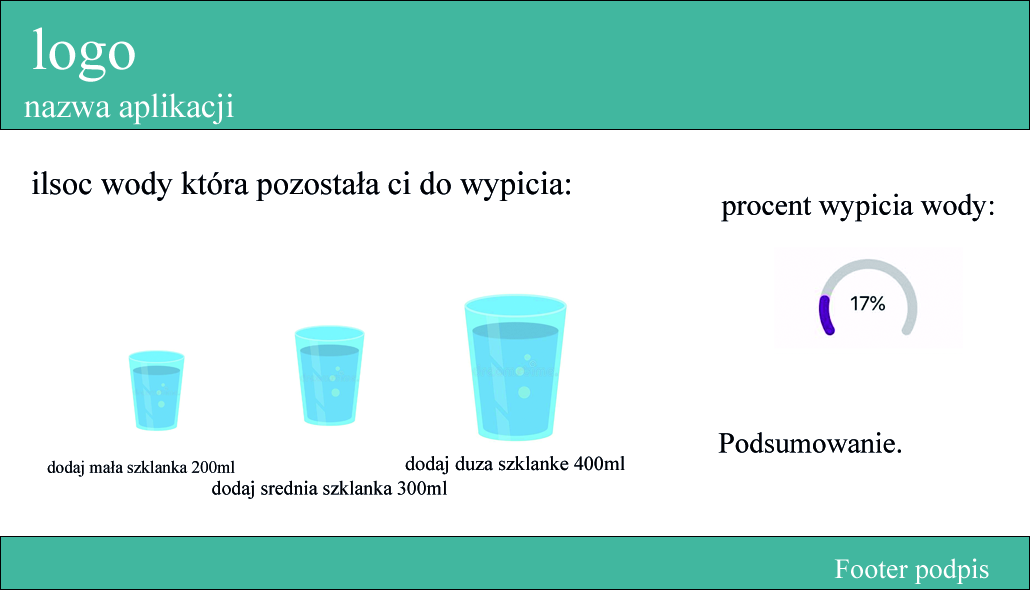
<style>
.page{position:relative;width:1030px;height:590px;background:#ffffff}
.page>*{position:absolute;margin:0}
.t1{font:59.5px "TimesNewRomanPSMT";color:#ffffff}
.t2{font:33.7px "TimesNewRomanPSMT";color:#ffffff}
.t3{font:32.6px "TimesNewRomanPSMT";color:#010102}
.t4{font:29.9px "TimesNewRomanPSMT";color:#010102}
.t5{font:29px "TimesNewRomanPSMT";color:#010102}
.t6{font:17.2px "TimesNewRomanPSMT";color:#010102}
.t7{font:20.2px "TimesNewRomanPSMT";color:#010102}
.t8{font:19.8px "TimesNewRomanPSMT";color:#010102}
.t9{font:28.1px "TimesNewRomanPSMT";color:#ffffff}
</style>
<div class="page">
<p class="t1" style="left:33px;top:27px;width:102px;height:55px">logo</p>
<p class="t2" style="left:24px;top:93px;width:210px;height:32px">nazwa aplikacji</p>
<p class="t3" style="left:32px;top:171px;width:538px;height:30px">ilsoc wody która pozostała ci do wypicia:</p>
<p class="t4" style="left:721px;top:193px;width:273px;height:29px">procent wypicia wody:</p>
<p class="t5" style="left:718px;top:432px;width:183px;height:21px">Podsumowanie.</p>
<p class="t6" style="left:47px;top:460px;width:188px;height:17px">dodaj mała szklanka 200ml</p>
<p class="t7" style="left:405px;top:456px;width:220px;height:19px">dodaj duza szklanke 400ml</p>
<p class="t8" style="left:212px;top:480px;width:235px;height:19px">dodaj srednia szklanka 300ml</p>
<p class="t9" style="left:834px;top:558px;width:155px;height:26px">Footer podpis</p>
</div>
